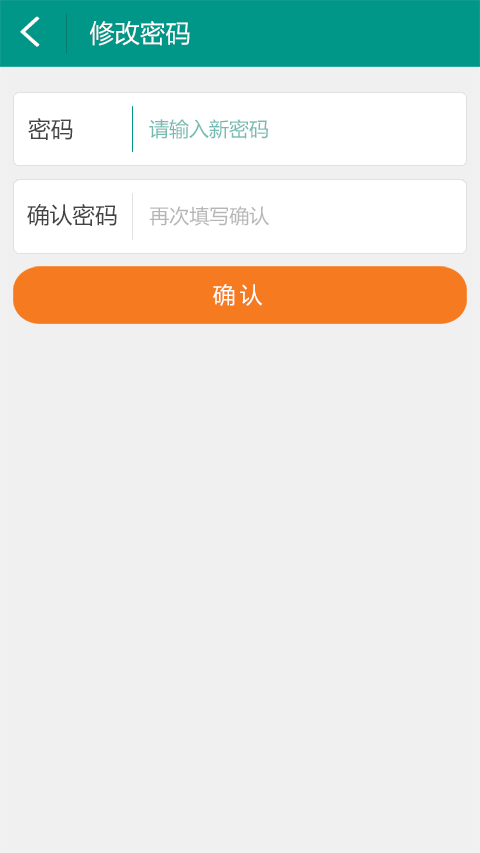
<style>
.page{position:relative;width:480px;height:853px;background:#f0f0f0}
.page>*{position:absolute;margin:0}
.t1{font:41.3px "SimHei";color:#ffffff;font-weight:bold}
.t2{font:25.3px "MicrosoftYaHei";color:#ffffff}
.t3{font:22.7px "MicrosoftYaHei";color:#444444}
.t4{font:20px "MicrosoftYaHei";color:#73bab1}
.t5{font:20px "MicrosoftYaHei";color:#b6b6b6}
.t6{font:22.7px "MicrosoftYaHei";letter-spacing:0.2em;color:#ffffff}
</style>
<div class="page">
<p class="t1" style="left:20px;top:16px;width:20px;height:31px">&lt;</p>
<p class="t2" style="left:89px;top:21px;width:101px;height:25px">修改密码</p>
<p class="t3" style="left:28px;top:118px;width:45px;height:22px">密码</p>
<p class="t4" style="left:149px;top:119px;width:119px;height:20px">请输入新密码</p>
<p class="t3" style="left:27px;top:204px;width:90px;height:22px">确认密码</p>
<p class="t5" style="left:149px;top:206px;width:120px;height:20px">再次填写确认</p>
<p class="t6" style="left:213px;top:284px;width:50px;height:22px">确认</p>
</div>
